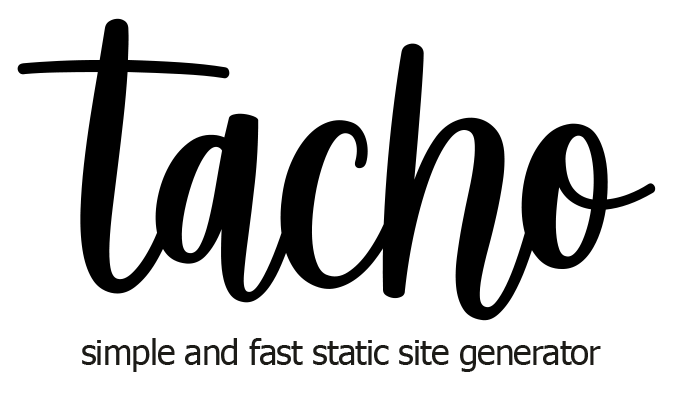
<style>
.page{position:relative;width:684px;height:396px;background:#ffffff}
.page>*{position:absolute;margin:0}
.t1{font:375.9px "SugarSpice";letter-spacing:-0.025em;color:#000000}
.t2{font:35px "Tahoma";letter-spacing:-0.025em;color:#1c1b17}
</style>
<div class="page">
<p class="t1" style="left:17px;top:18px;width:639px;height:303px">tacho</p>
<p class="t2" style="left:82px;top:338px;width:519px;height:34px">simple and fast static site generator</p>
</div>
